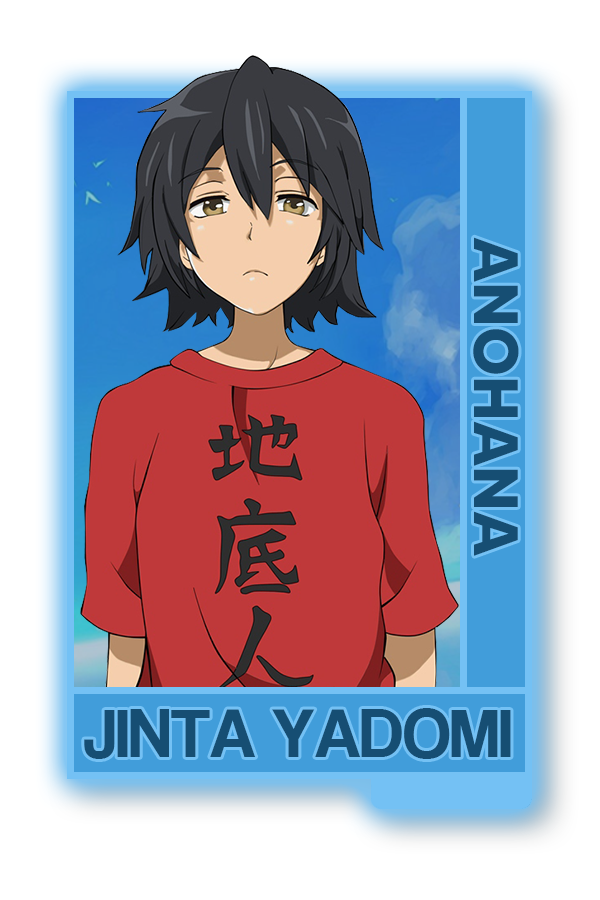
<style>
.page{position:relative;width:600px;height:900px;background:#ffffff}
.page>*{position:absolute;margin:0}
.t1{font:62.6px "MADETOMMY-Bold";color:#164e73}
.t2{font:70.5px "CoolveticaRg-Regular";color:#164e73}
</style>
<div class="page">
<p class="t1" style="left:473px;top:237px;width:46px;height:319px;rotate:90deg">ANOHANA</p>
<p class="t2" style="left:84px;top:708px;width:427px;height:51px">JINTA YADOMI</p>
</div>
